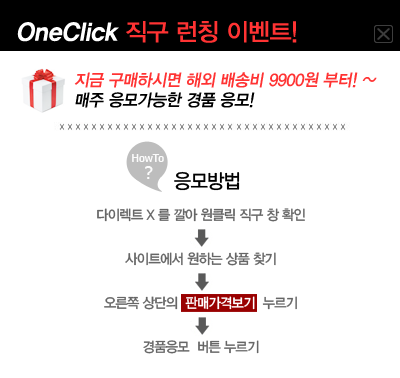
<style>
.page{position:relative;width:400px;height:378px;background:#ffffff}
.page>*{position:absolute;margin:0}
.t1{font:24px "YDIYGO330";letter-spacing:-0.025em;color:#ff3333}
.t2{font:24px "YDIYGO350";letter-spacing:-0.025em;color:#ffffff;font-style:italic}
.t3{font:17px "YDIYGO340";letter-spacing:-0.025em;color:#ff3333;font-style:italic;scale:0.95 1}
.t4{font:17px "YDIYGO340";letter-spacing:-0.025em;color:#000000;font-style:italic;scale:0.95 1}
.t5{font:20px "YDIYGO330";letter-spacing:-0.05em;color:#000000;scale:0.95 1}
.t6{font:14px/22px "YDIYGO330";letter-spacing:-0.05em;color:#666666;scale:0.95 1}
.t7{font:14px/22px "YDIYGO330";letter-spacing:-0.05em;color:#ffffff;scale:0.95 1}
</style>
<div class="page">
<p class="t1" style="left:17px;top:21px;width:280px;height:22px"><span class="t2">OneClick </span>직구 런칭 이벤트!</p>
<p class="t3" style="left:74px;top:72px;width:303px;height:36px">지금 구매하시면 해외 배송비 9900원 부터! ~ <br><span class="t4">매주 응모가능한 경품 응모!</span></p>
<p class="t5" style="left:174px;top:171px;width:66px;height:20px">응모방법</p>
<p class="t6" style="left:97px;top:208px;width:208px;height:146px;text-align:center">다이렉트 X 를 깔아 원클릭 직구 창 확인<br><br>사이트에서 원하는 상품 찾기<br><br>오른쪽 상단의  <span class="t7">판매가격보기  </span>누르기<br><br>경품응모  버튼 누르기</p>
</div>
